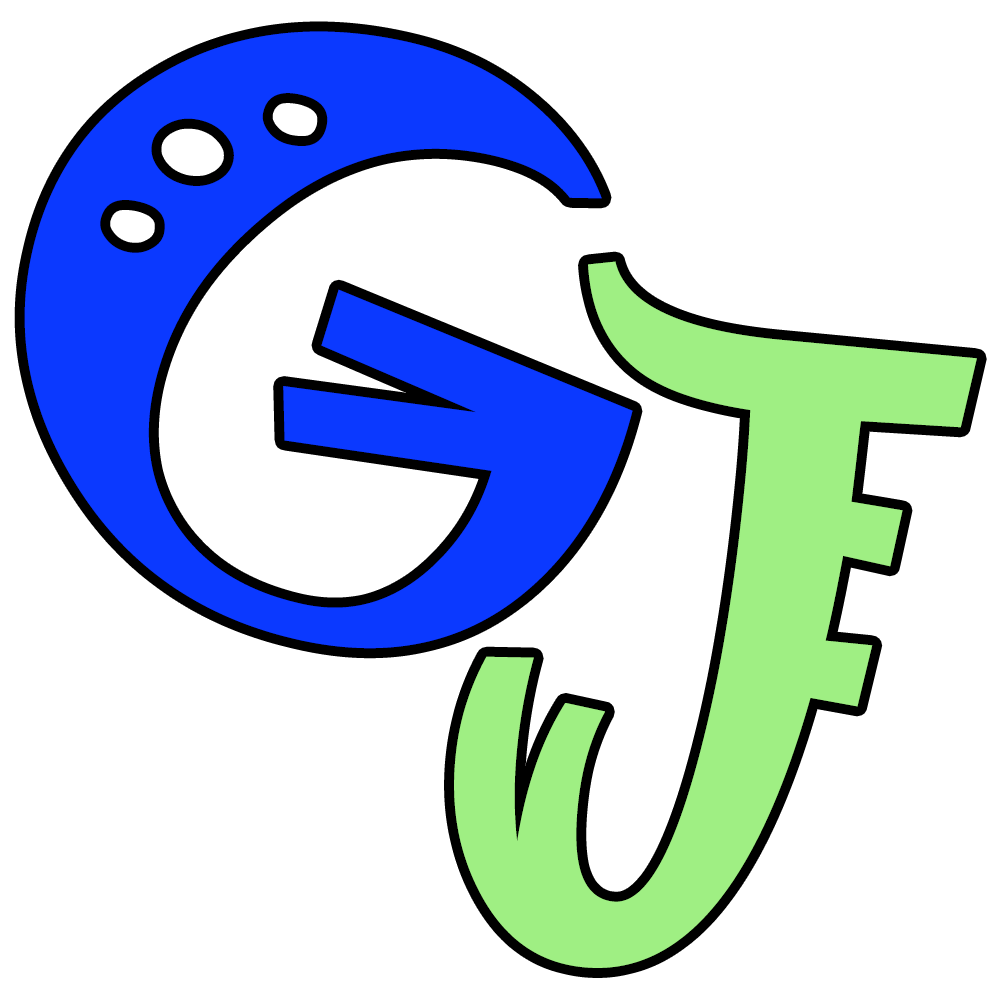
<style>
.page{position:relative;width:1000px;height:1000px;background:#ffffff}
.page>*{position:absolute;margin:0}
.t1{font:736.7px "Jokerman-Regular";letter-spacing:-0.2em;color:#0b39ff;scale:1.27 1}
.t2{font:779.4px "Jokerman-Regular";letter-spacing:-0.2em;color:#9fef83}
</style>
<div class="page">
<p class="t1" style="left:24px;top:31px;width:609px;height:618px;rotate:12deg">G</p>
<p class="t2" style="left:454px;top:261px;width:523px;height:707px;rotate:6deg">J</p>
</div>
